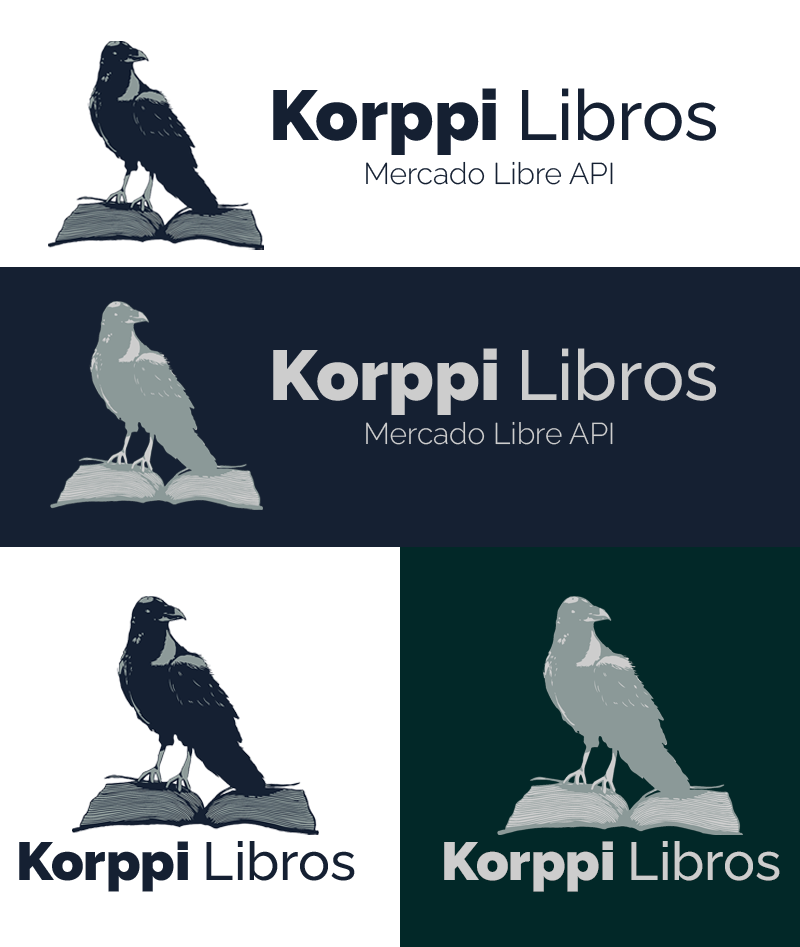
<style>
.page{position:relative;width:800px;height:947px;background:#ffffff}
.page>*{position:absolute;margin:0}
.t1{font:70.5px "Raleway-Black";color:#152032}
.t2{font:70.5px "Raleway-Medium";color:#152032}
.t3{font:30px "Raleway-Light";color:#152032}
.t4{font:70.5px "Raleway-Black";color:#cdcdcd}
.t5{font:70.5px "Raleway-Medium";color:#cdcdcd}
.t6{font:30px "Raleway-Light";color:#cdcdcd}
.t7{font:53.5px "Raleway-Black";color:#152032}
.t8{font:53.5px "Raleway-Medium";color:#152032}
.t9{font:53.5px "Raleway-Black";color:#cdcdcd}
.t10{font:53.5px "Raleway-Medium";color:#cdcdcd}
</style>
<div class="page">
<p class="t1" style="left:273px;top:88px;width:443px;height:67px">Korppi <span class="t2">Libros</span></p>
<p class="t3" style="left:366px;top:161px;width:247px;height:24px">Mercado Libre API</p>
<p class="t4" style="left:273px;top:348px;width:443px;height:67px">Korppi <span class="t5">Libros</span></p>
<p class="t6" style="left:366px;top:421px;width:247px;height:24px">Mercado Libre API</p>
<p class="t7" style="left:19px;top:841px;width:336px;height:51px">Korppi <span class="t8">Libros</span></p>
<p class="t9" style="left:444px;top:841px;width:336px;height:51px">Korppi <span class="t10">Libros</span></p>
</div>
